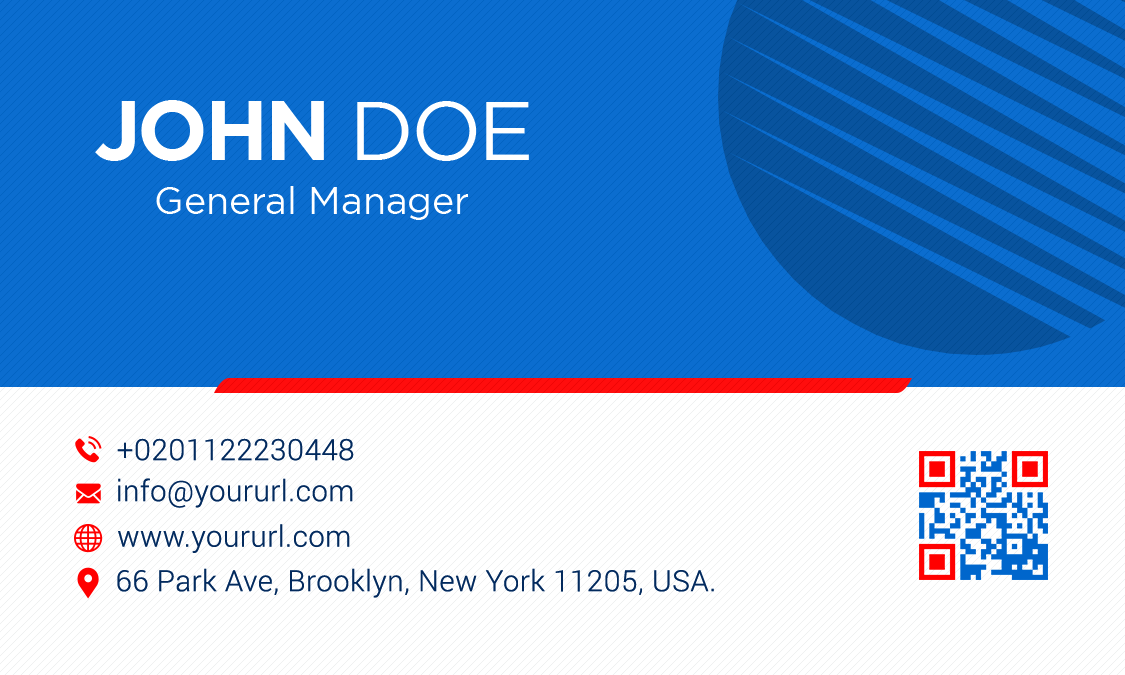
<style>
.page{position:relative;width:1125px;height:675px;background:#0b6dcf}
.page>*{position:absolute;margin:0}
.t1{font:83.3px "HomepageBaukasten-Bold";letter-spacing:-0.04em;color:#ffffff;text-transform:uppercase}
.t2{font:83.3px "HomepageBaukasten-Book";letter-spacing:-0.04em;color:#ffffff;text-transform:uppercase}
.t3{font:37.5px "HomepageBaukasten-Book";color:#ffffff}
.t4{font:29.2px "Roboto-Light";letter-spacing:0.02em;color:#032a5d}
</style>
<div class="page">
<p class="t1" style="left:95px;top:100px;width:434px;height:61px">John <span class="t2">Doe</span></p>
<p class="t3" style="left:156px;top:186px;width:312px;height:34px">General Manager</p>
<p class="t4" style="left:117px;top:438px;width:237px;height:23px">+0201122230448</p>
<p class="t4" style="left:118px;top:478px;width:235px;height:30px">info@yoururl.com</p>
<p class="t4" style="left:118px;top:524px;width:232px;height:29px">www.yoururl.com</p>
<p class="t4" style="left:117px;top:568px;width:597px;height:30px">66 Park Ave, Brooklyn, New York 11205, USA.</p>
</div>
